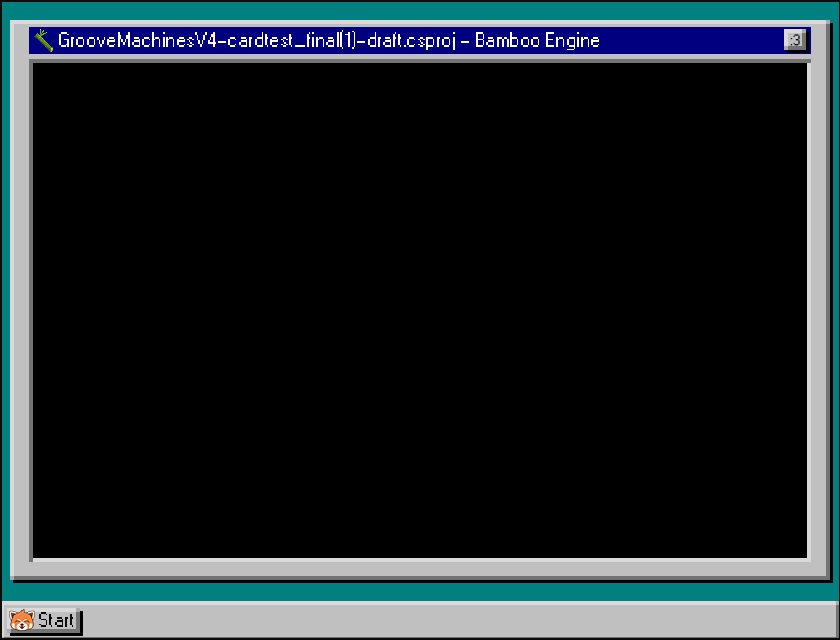
<style>
.page{position:relative;width:840px;height:640px;background:#000000}
.page>*{position:absolute;margin:0}
.t1{font:20.8px "W95FARegular";color:#ffffff}
.t2{font:15.1px "W95FARegular";color:#0b0b0b}
.t3{font:20.8px "W95FARegular";color:#0b0b0b}
</style>
<div class="page">
<p class="t1" style="left:59px;top:30px;width:540px;height:20px">GrooveMachinesV4-cardtest_final(1)-draft.csproj - Bamboo Engine</p>
<p class="t2" style="left:790px;top:34px;width:10px;height:12px">:3</p>
<p class="t3" style="left:39px;top:612px;width:34px;height:15px">Start</p>
</div>
